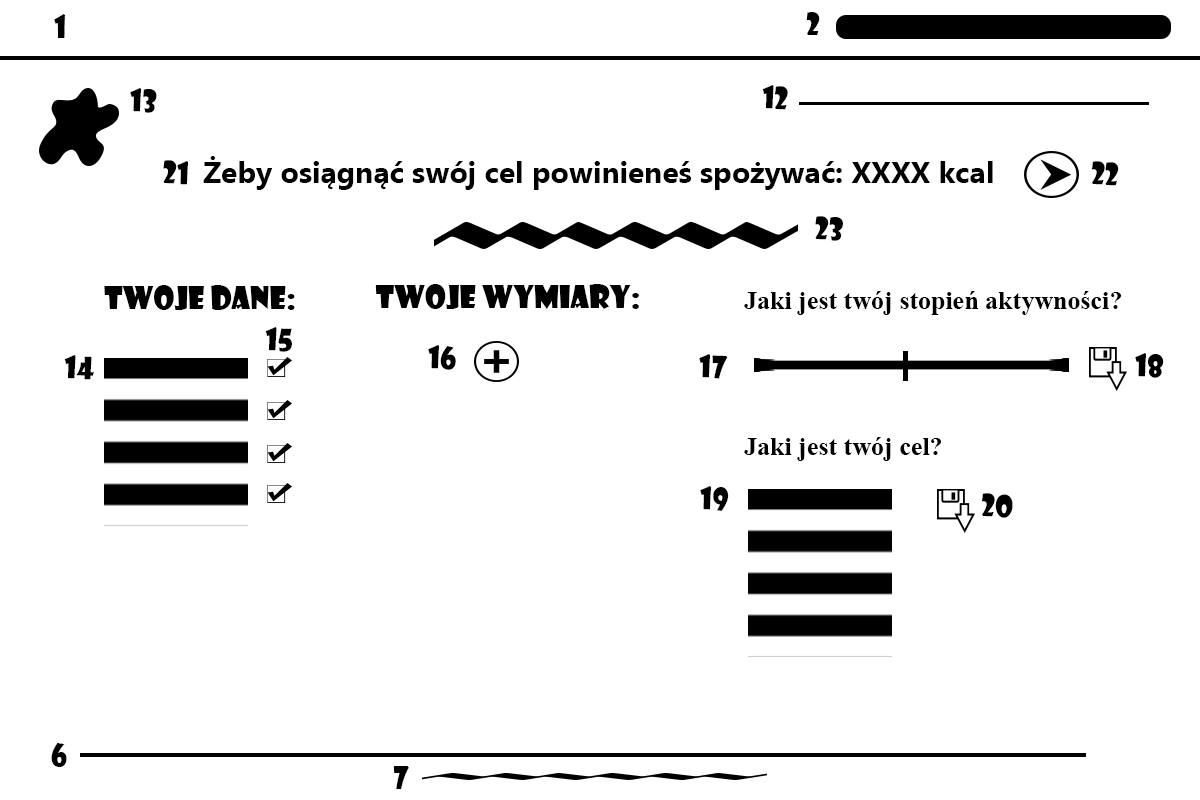
<style>
.page{position:relative;width:1200px;height:800px;background:#ffffff}
.page>*{position:absolute;margin:0}
.t1{font:30px "ShowcardGothic-Reg";color:#000000}
.t2{font:30px "Ebrima-Bold";color:#000000}
.t3{font:26px "TimesNewRomanPS-BoldMT";color:#000000}
</style>
<div class="page">
<p class="t1" style="left:54px;top:14px;width:11px;height:24px">1</p>
<p class="t1" style="left:806px;top:12px;width:14px;height:23px">2</p>
<p class="t1" style="left:130px;top:88px;width:27px;height:25px;rotate:2deg">13</p>
<p class="t1" style="left:762px;top:85px;width:26px;height:25px;rotate:2deg">12</p>
<p class="t1" style="left:163px;top:160px;width:25px;height:25px;rotate:2deg">21</p>
<p class="t2" style="left:203px;top:156px;width:790px;height:34px">Żeby osiągnąć swój cel powinieneś spożywać: XXXX kcal</p>
<p class="t1" style="left:1092px;top:161px;width:27px;height:25px;rotate:2deg">22</p>
<p class="t1" style="left:815px;top:216px;width:28px;height:25px;rotate:2deg">23</p>
<p class="t1" style="left:104px;top:285px;width:191px;height:25px">Twoje dane:</p>
<p class="t1" style="left:375px;top:284px;width:264px;height:25px">Twoje wymiary:</p>
<p class="t3" style="left:744px;top:291px;width:377px;height:24px">Jaki jest twój stopień aktywności?</p>
<p class="t1" style="left:265px;top:327px;width:27px;height:25px;rotate:2deg">15</p>
<p class="t1" style="left:428px;top:345px;width:28px;height:25px;rotate:2deg">16</p>
<p class="t1" style="left:1135px;top:353px;width:29px;height:25px;rotate:2deg">18</p>
<p class="t1" style="left:64px;top:355px;width:30px;height:25px;rotate:2deg">14</p>
<p class="t1" style="left:699px;top:354px;width:29px;height:25px;rotate:2deg">17</p>
<p class="t3" style="left:744px;top:437px;width:197px;height:24px">Jaki jest twój cel?</p>
<p class="t1" style="left:700px;top:486px;width:29px;height:25px;rotate:2deg">19</p>
<p class="t1" style="left:982px;top:493px;width:31px;height:25px;rotate:2deg">20</p>
<p class="t1" style="left:51px;top:743px;width:16px;height:24px">6</p>
<p class="t1" style="left:393px;top:766px;width:16px;height:24px">7</p>
</div>
